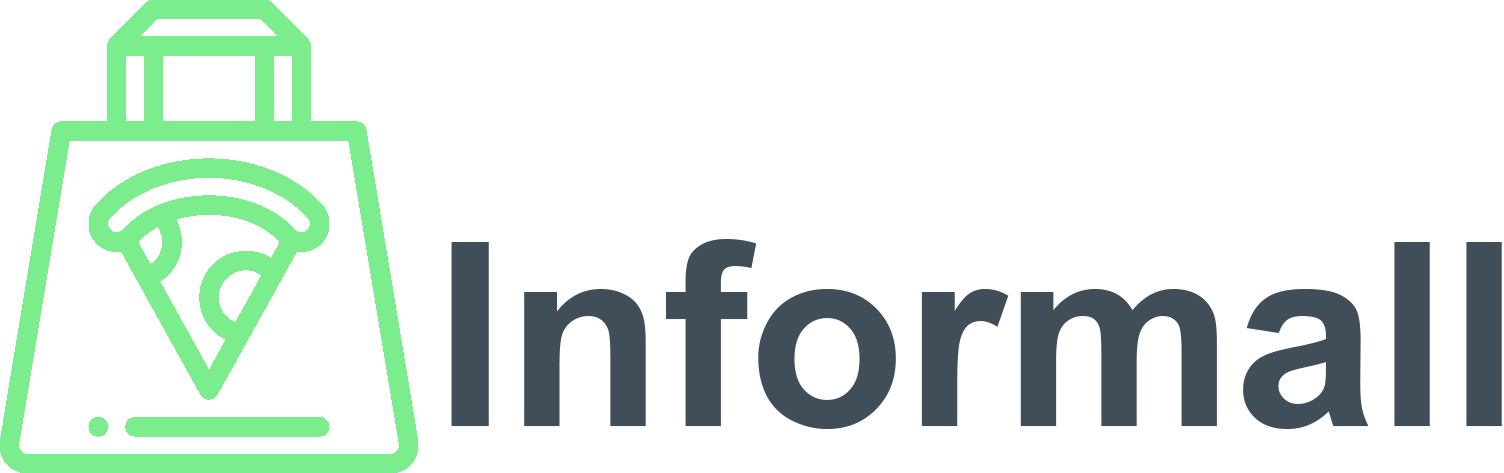
<style>
.page{position:relative;width:1504px;height:473px;background:#ffffff}
.page>*{position:absolute;margin:0}
.t1{font:256.9px "Arial-BoldMT";color:#404e5a}
</style>
<div class="page">
<p class="t1" style="left:451px;top:239px;width:1051px;height:190px">Informall</p>
</div>
